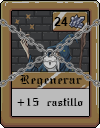
<style>
.page{position:relative;width:100px;height:128px}
.page>*{position:absolute;margin:0}
.t1{font:12px "Arial-BoldMT";color:#000000}
.t2{font:12px "SWGothe";color:#000000}
.t3{font:10px "SWGothe";color:#000000}
</style>
<div class="page">
<p class="t1" style="left:54px;top:17px;width:14px;height:9px">24</p>
<p class="t2" style="left:20px;top:75px;width:62px;height:12px">Regenerar</p>
<p class="t3" style="left:17px;top:98px;width:66px;height:8px">+15 castillo</p>
</div>
